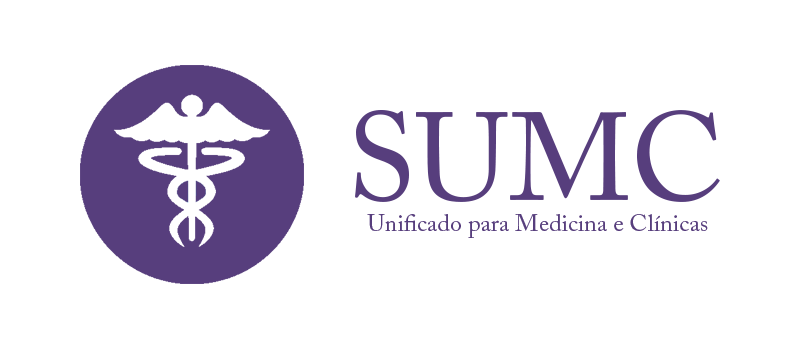
<style>
.page{position:relative;width:800px;height:348px;background:#ffffff}
.page>*{position:absolute;margin:0}
.t1{font:124.9px "ACaslonPro-Regular";color:#573e7d}
.t2{font:24px "ACaslonPro-Regular";color:#573e7d}
</style>
<div class="page">
<p class="t1" style="left:355px;top:110px;width:365px;height:92px">SUMC</p>
<p class="t2" style="left:367px;top:214px;width:341px;height:24px">Unificado para Medicina e Clínicas</p>
</div>
